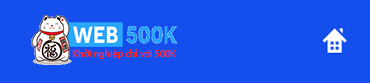
<style>
.page{position:relative;width:370px;height:83px;background:#144eec}
.page>*{position:absolute;margin:0}
.t1{font:10px "MyriadPro-Regular";color:#f32a2b}
</style>
<div class="page">
<p class="t1" style="left:73px;top:49px;width:103px;height:10px">Khởi nghiệp chỉ với 500K</p>
</div>
